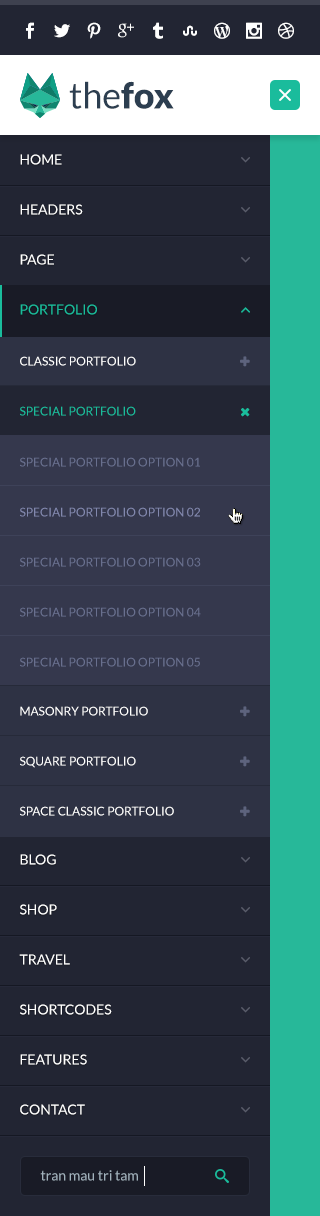
<style>
.page{position:relative;width:320px;height:1216px;background:#222533}
.page>*{position:absolute;margin:0}
.t1{font:36px "Lato-Regular";color:#2c3e50}
.t2{font:36px "Lato-Black";color:#2c3e50}
.t3{font:14px/50px "Lato-Regular";color:#ffffff;text-transform:uppercase}
.t4{font:14px/50px "Lato-Regular";color:#1abc9c;text-transform:uppercase}
.t5{font:12px/50px "Lato-Regular";color:#ffffff;text-transform:uppercase}
.t6{font:12px/50px "Lato-Regular";color:#1abc9c;text-transform:uppercase}
.t7{font:12px/50px "Lato-Regular";color:#69708f;text-transform:uppercase}
.t8{font:12px/50px "Lato-Regular";color:#8288ae;text-transform:uppercase}
.t9{font:14px "Lato-Regular";color:#a1b1bc}
</style>
<div class="page">
<p class="t1" style="left:69px;top:81px;width:105px;height:28px">the<span class="t2">fox</span></p>
<p class="t3" style="left:19px;top:154px;width:93px;height:961px">Home<br>HEADERS<br>Page<br><span class="t4">Portfolio<br></span><br><br><br><br><br><br><br><br><br><br>Blog<br>shop<br>travel<br>shortcodes<br>features<br>contact</p>
<p class="t5" style="left:20px;top:356px;width:154px;height:460px">Classic Portfolio<br><span class="t6">Special Portfolio<br></span><br><br><br><br><br>Masonry Portfolio<br>Square Portfolio<br>Space Classic Portfolio</p>
<p class="t7" style="left:20px;top:457px;width:181px;height:210px">SPECIAL PORTFOLIO OPTION 01<br><span class="t8">SPECIAL PORTFOLIO OPTION 02<br></span>SPECIAL PORTFOLIO OPTION 03<br>SPECIAL PORTFOLIO OPTION 04<br>SPECIAL PORTFOLIO OPTION 05</p>
<p class="t9" style="left:40px;top:1170px;width:98px;height:11px">tran mau tri tam</p>
</div>
